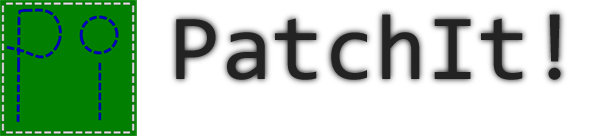
<style>
.page{position:relative;width:600px;height:136px;background:#ffffff}
.page>*{position:absolute;margin:0}
.t1{font:93.5px "Consolas";color:#232323}
</style>
<div class="page">
<p class="t1" style="left:176px;top:14px;width:385px;height:66px">PatchIt!</p>
</div>
